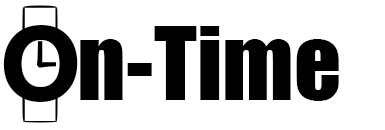
<style>
.page{position:relative;width:385px;height:130px;background:#ffffff}
.page>*{position:absolute;margin:0}
.t1{font:106.7px "Gadugi-Bold";color:#010101}
.t2{font:93.3px "Impact";color:#010101}
</style>
<div class="page">
<p class="t1" style="left:3px;top:25px;width:75px;height:77px">O</p>
<p class="t2" style="left:80px;top:26px;width:259px;height:75px">n-Time</p>
</div>
